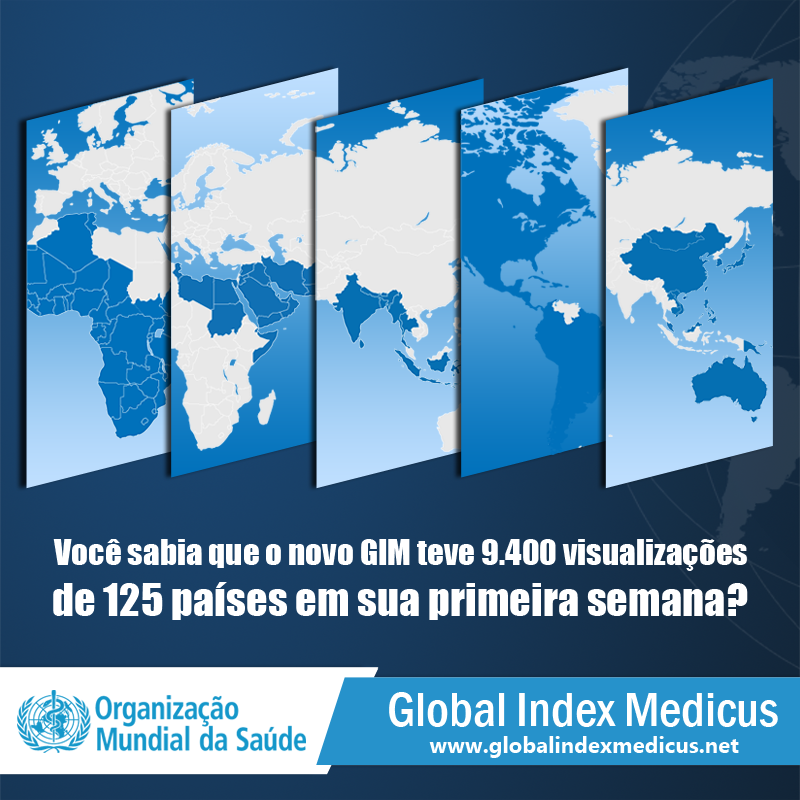
<style>
.page{position:relative;width:800px;height:800px}
.page>*{position:absolute;margin:0}
.t1{font:33.1px "Impact";color:#ffffff}
.t2{font:42.4px "Impact";color:#ffffff}
.t3{font:49.7px "FranklinGothic-MediumCond";color:#ffffff}
.t4{font:22.2px "Gadugi-Bold";color:#ffffff}
</style>
<div class="page">
<p class="t1" style="left:53px;top:539px;width:695px;height:81px;text-align:right">Você sabia que o novo GIM teve 9.400 visualizações<br><span class="t2"> de 125 países em sua primeira semana?</span></p>
<p class="t3" style="left:389px;top:692px;width:389px;height:35px">Global Index Medicus</p>
<p class="t4" style="left:429px;top:736px;width:310px;height:22px">www.globalindexmedicus.net</p>
</div>
